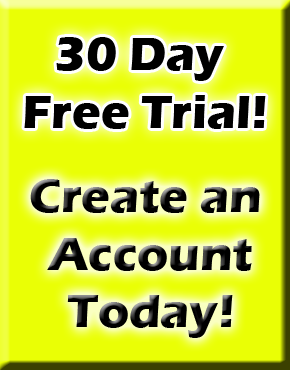
<style>
.page{position:relative;width:290px;height:370px;background:#eaff05}
.page>*{position:absolute;margin:0}
.t1{font:48px "ErasITC-Bold";color:#000000}
</style>
<div class="page">
<p class="t1" style="left:24px;top:37px;width:242px;height:92px;text-align:center">30 Day <br>Free Trial!</p>
<p class="t1" style="left:30px;top:179px;width:230px;height:159px;text-align:center">Create an <br>Account<br>Today!</p>
</div>
